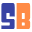
<style>
.page{position:relative;width:32px;height:32px;background:#ffffff}
.page>*{position:absolute;margin:0}
.t1{font:32.5px "GyparodyHv-Regular";color:#3943a4;scale:0.85 1}
.t2{font:32.5px "GyparodyHv-Regular";color:#ff8b46;scale:0.85 1}
</style>
<div class="page">
<p class="t1" style="left:1px;top:3px;width:30px;height:26px">S<span class="t2">B</span></p>
</div>
